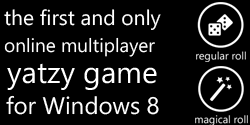
<style>
.page{position:relative;width:250px;height:125px;background:#000000}
.page>*{position:absolute;margin:0}
.t1{font:21px "SegoeWP";color:#ffffff}
.t2{font:19px "SegoeWP";color:#ffffff}
.t3{font:30px "SegoeWP";color:#ffffff}
.t4{font:24px "SegoeWP";color:#ffffff}
</style>
<div class="page">
<p class="t1" style="left:4px;top:9px;width:157px;height:21px">the first and only</p>
<p class="t2" style="left:4px;top:37px;width:151px;height:20px">online multiplayer</p>
<p class="t3" style="left:7px;top:63px;width:150px;height:27px">yatzy game</p>
<p class="t4" style="left:6px;top:95px;width:153px;height:20px">for Windows 8</p>
</div>
